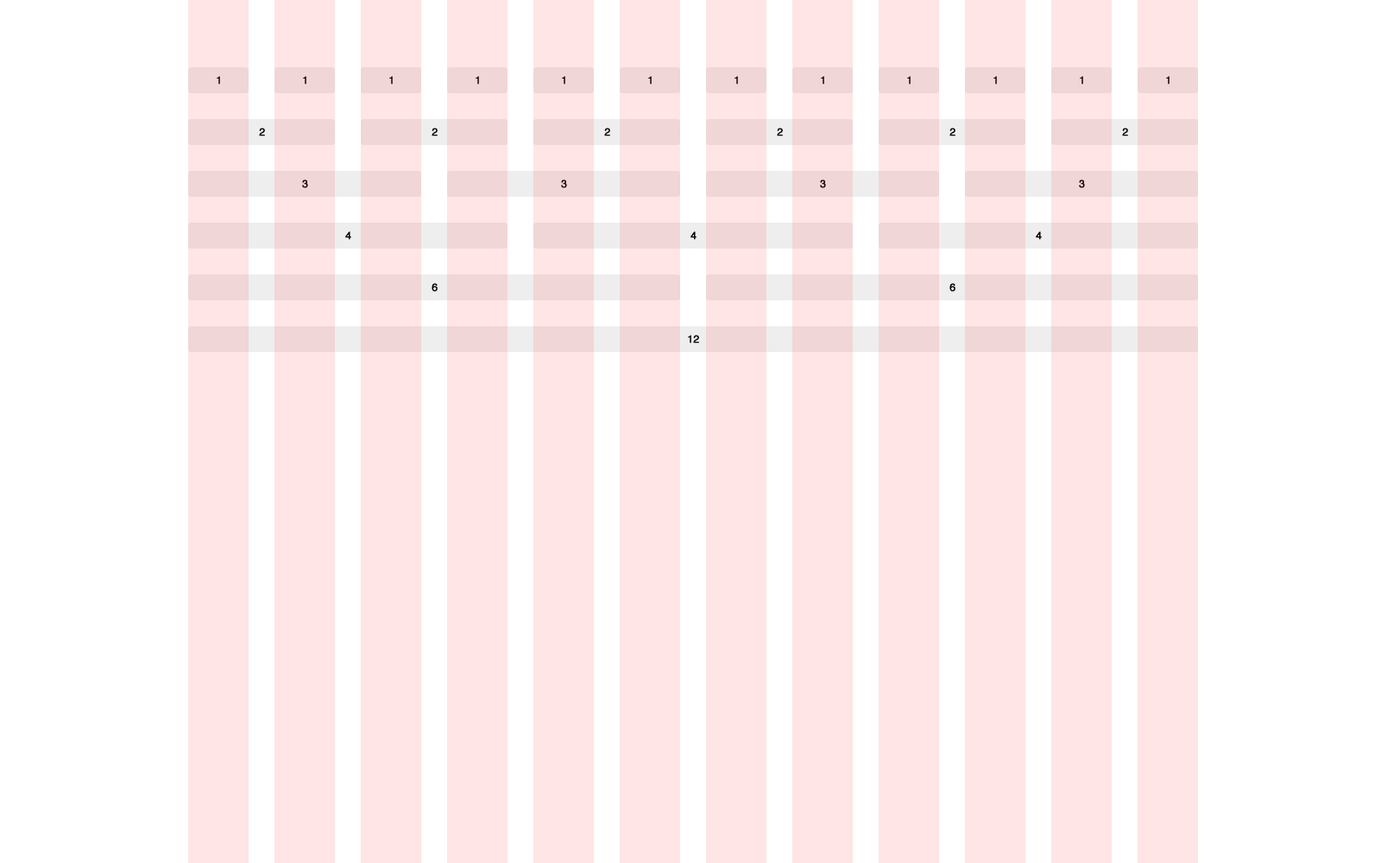
<style>
.page{position:relative;width:1381px;height:863px;background:#ffffff}
.page>*{position:absolute;margin:0}
.t1{font:10.4px "Helvetica";color:#1a0000;font-weight:bold}
.t2{font:10.4px "Helvetica";color:#000000;font-weight:bold}
</style>
<div class="page">
<p class="t1" style="left:217px;top:76px;width:3px;height:9px">1</p>
<p class="t1" style="left:303px;top:76px;width:3px;height:9px">1</p>
<p class="t1" style="left:389px;top:76px;width:4px;height:9px">1</p>
<p class="t1" style="left:476px;top:76px;width:3px;height:9px">1</p>
<p class="t1" style="left:562px;top:76px;width:3px;height:9px">1</p>
<p class="t1" style="left:648px;top:76px;width:4px;height:9px">1</p>
<p class="t1" style="left:735px;top:76px;width:3px;height:9px">1</p>
<p class="t1" style="left:821px;top:76px;width:3px;height:9px">1</p>
<p class="t1" style="left:907px;top:76px;width:4px;height:9px">1</p>
<p class="t1" style="left:994px;top:76px;width:3px;height:9px">1</p>
<p class="t1" style="left:1080px;top:76px;width:3px;height:9px">1</p>
<p class="t1" style="left:1166px;top:76px;width:4px;height:9px">1</p>
<p class="t2" style="left:259px;top:128px;width:6px;height:8px">2</p>
<p class="t2" style="left:432px;top:128px;width:6px;height:8px">2</p>
<p class="t2" style="left:604px;top:128px;width:6px;height:8px">2</p>
<p class="t2" style="left:777px;top:128px;width:6px;height:8px">2</p>
<p class="t2" style="left:950px;top:128px;width:6px;height:8px">2</p>
<p class="t2" style="left:1122px;top:128px;width:6px;height:8px">2</p>
<p class="t1" style="left:302px;top:180px;width:6px;height:8px">3</p>
<p class="t1" style="left:561px;top:180px;width:6px;height:8px">3</p>
<p class="t1" style="left:820px;top:180px;width:6px;height:8px">3</p>
<p class="t1" style="left:1079px;top:180px;width:6px;height:8px">3</p>
<p class="t2" style="left:345px;top:231px;width:6px;height:9px">4</p>
<p class="t2" style="left:691px;top:231px;width:6px;height:9px">4</p>
<p class="t2" style="left:1036px;top:231px;width:6px;height:9px">4</p>
<p class="t2" style="left:432px;top:283px;width:6px;height:9px">6</p>
<p class="t2" style="left:950px;top:283px;width:6px;height:9px">6</p>
<p class="t2" style="left:688px;top:335px;width:11px;height:9px">12</p>
</div>
